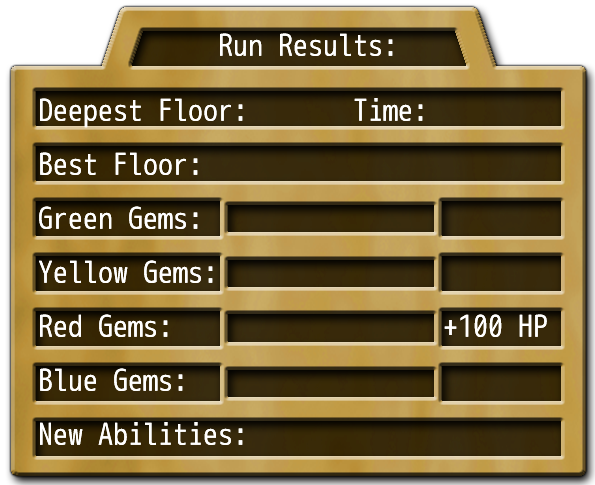
<style>
.page{position:relative;width:595px;height:485px}
.page>*{position:absolute;margin:0}
.t1{font:30px/54px "mplus-1m-regular";color:#ffffff}
.t2{font:30px/65px "mplus-1m-regular";color:#ffffff}
</style>
<div class="page">
<p class="t1" style="left:39px;top:33px;width:508px;height:412px"><span class="t2">            Run Results:<br>Deepest Floor:       Time:<br></span>Best Floor:<br>Green Gems:<br>Yellow Gems:<br>Red Gems:                  +100 HP<br>Blue Gems:<br>New Abilities:</p>
<p class="t1" style="left:39px;top:33px;width:508px;height:412px"><span class="t2">            Run Results:<br>Deepest Floor:       Time:<br></span>Best Floor:<br>Green Gems:<br>Yellow Gems:<br>Red Gems:                  +100 HP<br>Blue Gems:<br>New Abilities:</p>
</div>
